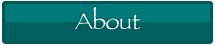
<style>
.page{position:relative;width:215px;height:45px;background:#006060}
.page>*{position:absolute;margin:0}
.t1{font:36px "ParchmentMF";color:#ffffff}
</style>
<div class="page">
<p class="t1" style="left:75px;top:7px;width:66px;height:23px">About</p>
</div>
